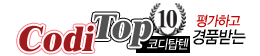
<style>
.page{position:relative;width:260px;height:56px;background:#ffffff}
.page>*{position:absolute;margin:0}
.t1{font:36px "Dutch801BT-ExtraBold";color:#525252;font-style:italic}
.t2{font:14px "YDIYGO330";letter-spacing:-0.05em;color:#cb0000;font-style:italic;scale:0.9 1}
.t3{font:36px "Dutch801BT-ExtraBold";color:#9e1b1d;font-style:italic}
.t4{font:17px "YDIYGO330";letter-spacing:-0.05em;color:#000000;font-style:italic;scale:0.9 1}
.t5{font:13px "YDIYGO330";letter-spacing:-0.05em;color:#ffffff;font-style:italic;scale:0.9 1}
</style>
<div class="page">
<p class="t1" style="left:93px;top:14px;width:59px;height:33px">Top</p>
<p class="t1" style="left:93px;top:14px;width:59px;height:33px">Top</p>
<p class="t2" style="left:196px;top:14px;width:44px;height:14px">평가하고</p>
<p class="t3" style="left:19px;top:25px;width:75px;height:27px">Codi</p>
<p class="t3" style="left:19px;top:25px;width:75px;height:27px">Codi</p>
<p class="t4" style="left:192px;top:29px;width:54px;height:16px">경품받는</p>
<p class="t5" style="left:147px;top:38px;width:42px;height:12px">코디탑텐</p>
</div>
